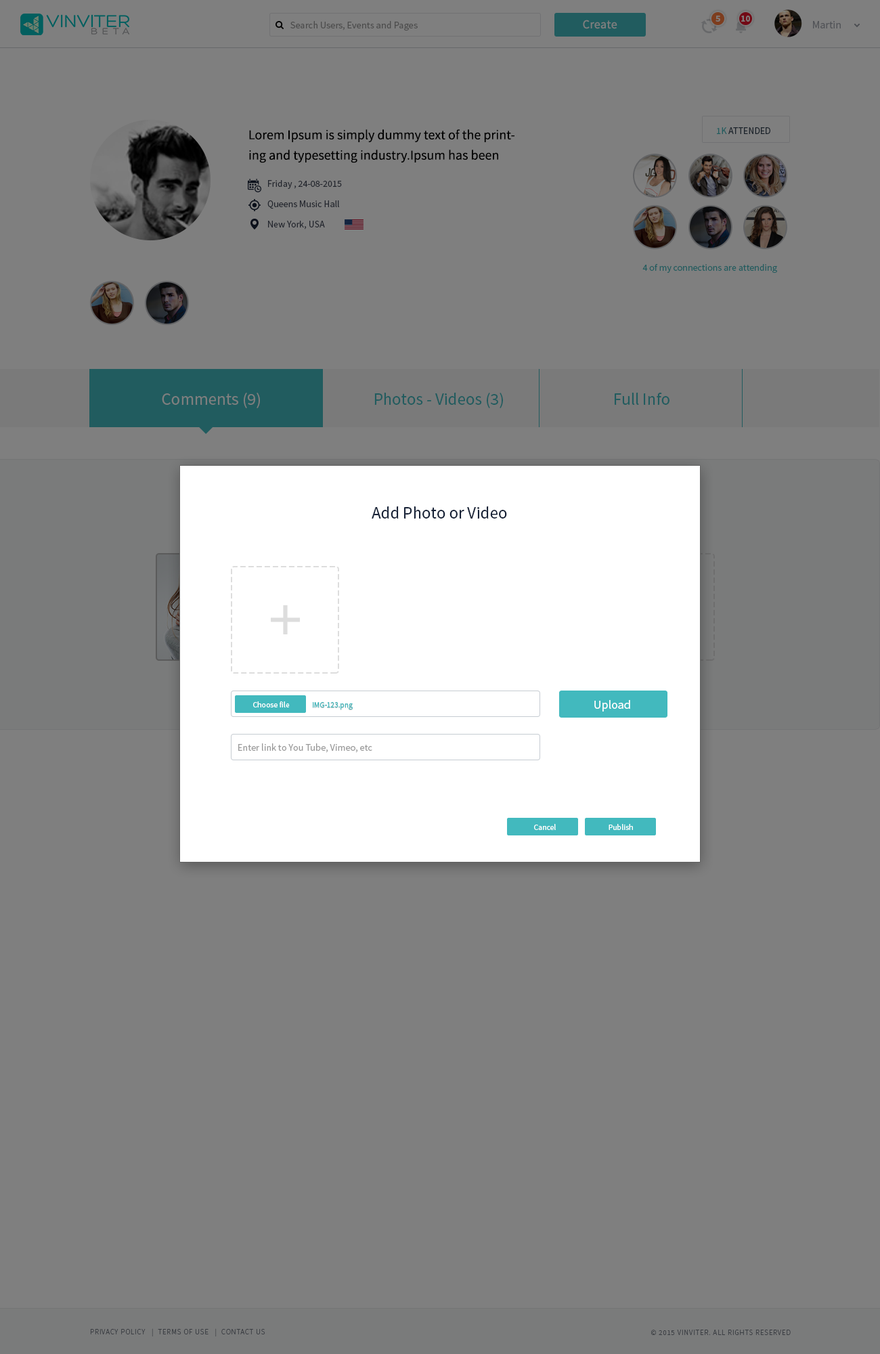
<style>
.page{position:relative;width:880px;height:1354px;background:#7f7f7f}
.page>*{position:absolute;margin:0}
.t1{font:8.8px "SourceSansPro-Bold";color:#7f7f7f}
.t2{font:9.7px "SourceSansPro-Regular";color:#4c4c4c}
.t3{font:12.2px "SourceSansPro-Regular";letter-spacing:0.02em;color:#7f7f7f}
.t4{font:10.8px "SourceSansPro-Regular";color:#515357}
.t5{font:13.5px/20.3px "SourceSansPro-Regular";color:#000000}
.t6{font:9.5px "SourceSansPro-Regular";color:#1b232b}
.t7{font:9.5px/13.5px "SourceSansPro-Regular";color:#23262e}
.t8{font:9.5px "SourceSansPro-Regular";color:#215c5f}
.t9{font:16.9px "SourceSansPro-Regular";color:#7f7f7f}
.t10{font:16.9px "SourceSansPro-Regular";color:#215c5f}
.t11{font:16.9px "SourceSansPro-Regular";color:#162136}
.t12{font:7.9px "SourceSansPro-Regular";color:#ffffff}
.t13{font:12.2px "SourceSansPro-Regular";color:#ffffff}
.t14{font:8.2px "SourceSansPro-Regular";color:#42b9be;scale:0.94 1}
.t15{font:9.7px "SourceSansPro-Regular";color:#999999}
.t16{font:7.4px "SourceSansPro-Light";letter-spacing:0.075em;color:#3a3d42;text-transform:uppercase}
</style>
<div class="page">
<p class="t1" style="left:716px;top:16px;width:5px;height:6px">5</p>
<p class="t1" style="left:742px;top:16px;width:8px;height:6px">10</p>
<p class="t2" style="left:291px;top:21px;width:127px;height:10px">Search Users, Events and Pages</p>
<p class="t3" style="left:583px;top:20px;width:35px;height:9px">Create</p>
<p class="t4" style="left:813px;top:21px;width:28px;height:7px">Martin</p>
<p class="t5" style="left:249px;top:129px;width:266px;height:34px">Lorem Ipsum is simply dummy text of the printing and typesetting industry.Ipsum has been</p>
<p class="t6" style="left:717px;top:127px;width:54px;height:7px">1K ATTENDED</p>
<p class="t7" style="left:268px;top:180px;width:74px;height:50px">Friday , 24-08-2015<br>Queens Music Hall<br>New York, USA</p>
<p class="t8" style="left:643px;top:264px;width:134px;height:9px">4 of my connections are attending</p>
<p class="t9" style="left:162px;top:393px;width:98px;height:15px">Comments (9)</p>
<p class="t10" style="left:375px;top:393px;width:128px;height:15px">Photos - Videos (3)</p>
<p class="t10" style="left:615px;top:393px;width:55px;height:12px">Full Info</p>
<p class="t11" style="left:372px;top:507px;width:135px;height:12px">Add Photo or Video</p>
<p class="t12" style="left:253px;top:702px;width:37px;height:6px">Choose file</p>
<p class="t13" style="left:595px;top:700px;width:35px;height:12px">Upload</p>
<p class="t14" style="left:313px;top:702px;width:40px;height:8px">IMG-123.png</p>
<p class="t15" style="left:238px;top:744px;width:134px;height:9px">Enter link to You Tube, Vimeo, etc</p>
<p class="t12" style="left:534px;top:824px;width:22px;height:6px">Cancel</p>
<p class="t12" style="left:609px;top:824px;width:24px;height:6px">Publish</p>
<p class="t16" style="left:90px;top:1329px;width:175px;height:8px">Privacy Policy   |  Terms of Use   |  Contact us</p>
<p class="t16" style="left:651px;top:1330px;width:140px;height:5px">© 2015 VINVITER. All rights reserved</p>
</div>
